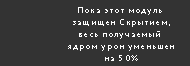
<style>
.page{position:relative;width:190px;height:66px;background:#333333}
.page>*{position:absolute;margin:0}
.t1{font:8px/12px "PTSans-Caption";letter-spacing:0.145em;color:#ffffff}
</style>
<div class="page">
<p class="t1" style="left:68px;top:7px;width:106px;height:54px;text-align:center">Пока этот модуль <br>защищен Скрытием,<br>весь получаемый <br>ядром урон уменьшен<br>на 50%</p>
</div>
